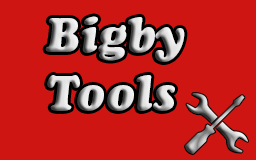
<style>
.page{position:relative;width:256px;height:160px;background:#ce1512}
.page>*{position:absolute;margin:0}
.t1{font:48px "CooperBlackStd-Italic"}
</style>
<div class="page">
<p class="t1" style="left:45px;top:16px;width:140px;height:95px">Bigby<br>Tools</p>
</div>
